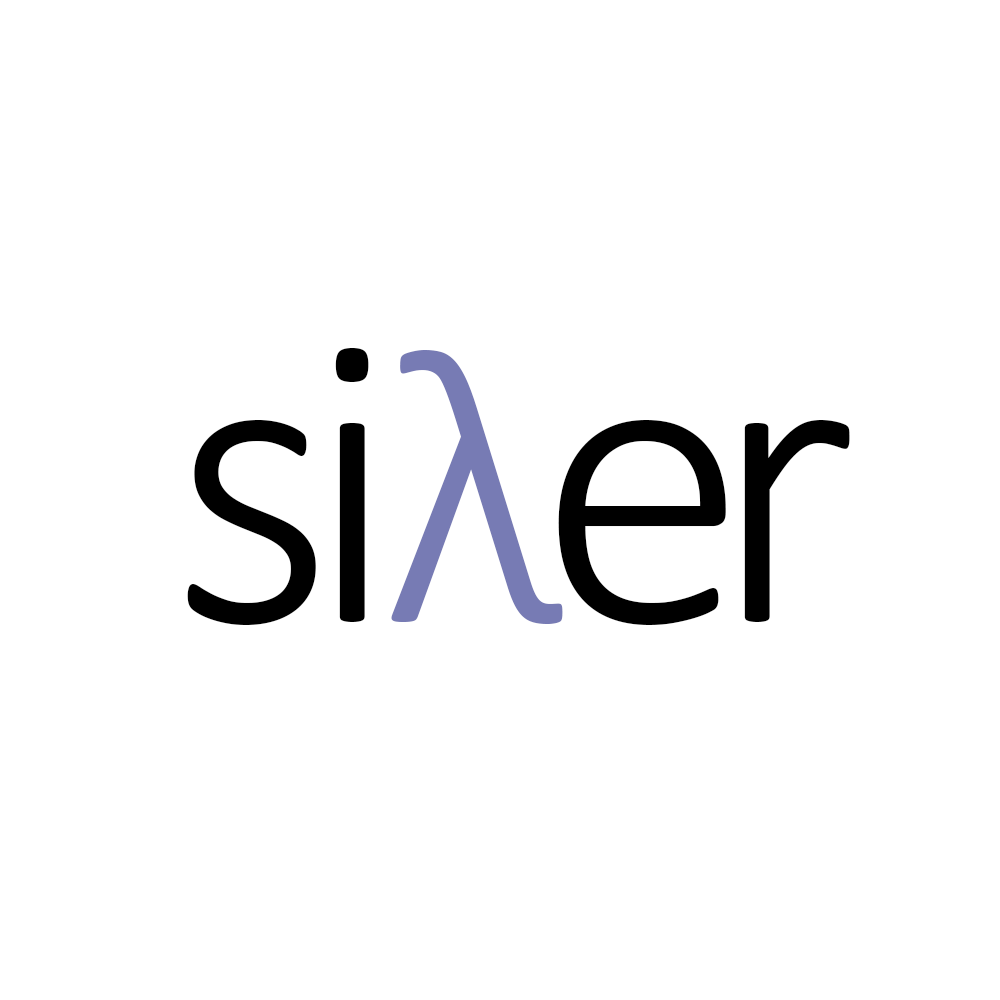
<style>
.page{position:relative;width:1000px;height:1000px;background:#ffffff}
.page>*{position:absolute;margin:0}
.t1{font:427px "Calibri-Light";letter-spacing:-0.05em;color:#000000}
.t2{font:397.3px "Calibri-Light";letter-spacing:-0.11em;color:#777bb4}
</style>
<div class="page">
<p class="t1" style="left:187px;top:348px;width:663px;height:277px">si<span class="t2">λ</span>er</p>
</div>
